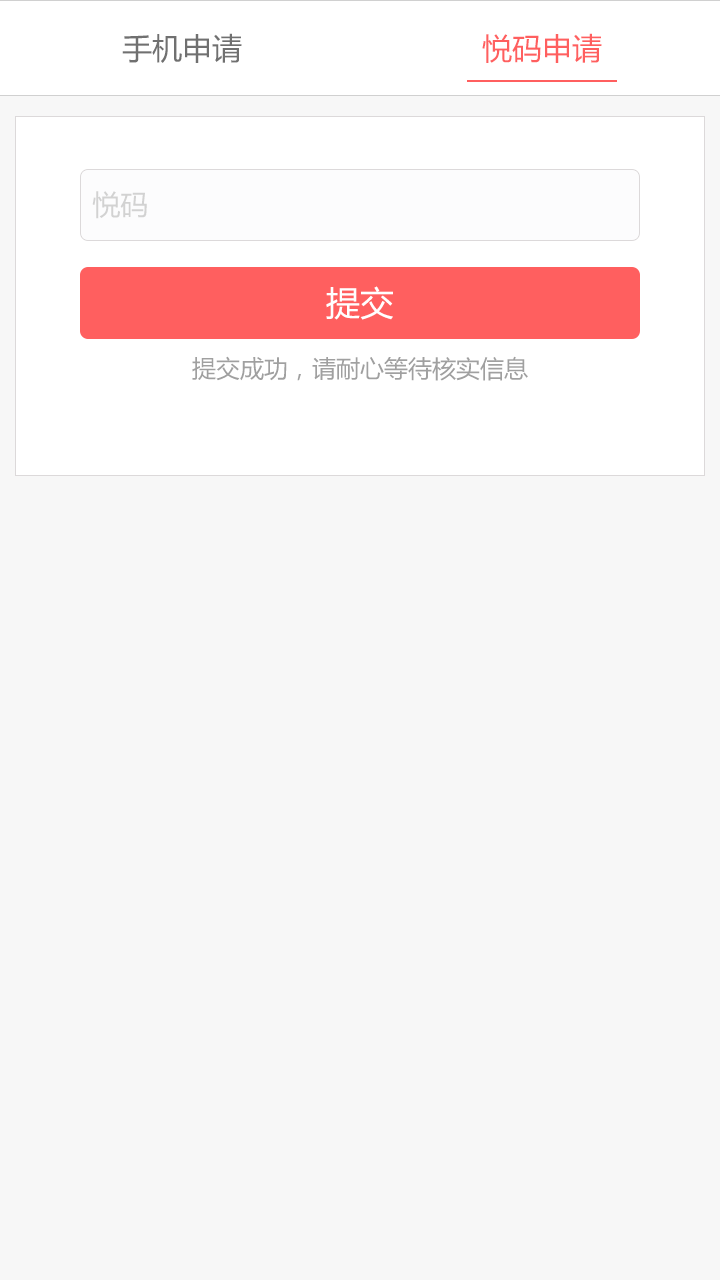
<style>
.page{position:relative;width:720px;height:1280px;background:#f7f7f7}
.page>*{position:absolute;margin:0}
.t1{font:30px "MicrosoftYaHei";color:#707070}
.t2{font:30px "MicrosoftYaHei";color:#ff5f5f}
.t3{font:28px "MicrosoftYaHei";color:#d2d2d2}
.t4{font:34px "MicrosoftYaHei";color:#ffffff}
.t5{font:24px "MicrosoftYaHei";color:#a0a0a0}
</style>
<div class="page">
<p class="t1" style="left:122px;top:33px;width:120px;height:30px">手机申请</p>
<p class="t2" style="left:482px;top:33px;width:120px;height:30px">悦码申请</p>
<p class="t3" style="left:92px;top:191px;width:55px;height:28px">悦码</p>
<p class="t4" style="left:326px;top:286px;width:67px;height:34px">提交</p>
<p class="t5" style="left:192px;top:356px;width:336px;height:25px">提交成功，请耐心等待核实信息</p>
</div>
